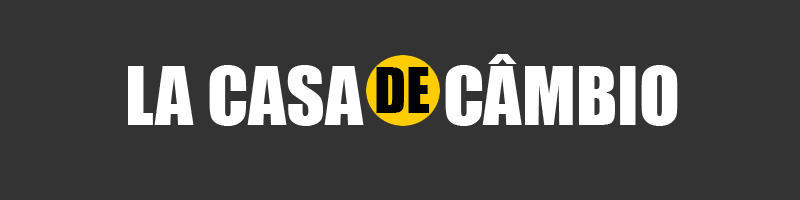
<style>
.page{position:relative;width:800px;height:200px;background:#333333}
.page>*{position:absolute;margin:0}
.t1{font:75px "Impact";color:#ffffff}
.t2{font:58.3px "Impact";color:#000000}
</style>
<div class="page">
<p class="t1" style="left:128px;top:54px;width:550px;height:72px">LA CASA      CÂMBIO</p>
<p class="t2" style="left:376px;top:67px;width:53px;height:46px">DE</p>
</div>
